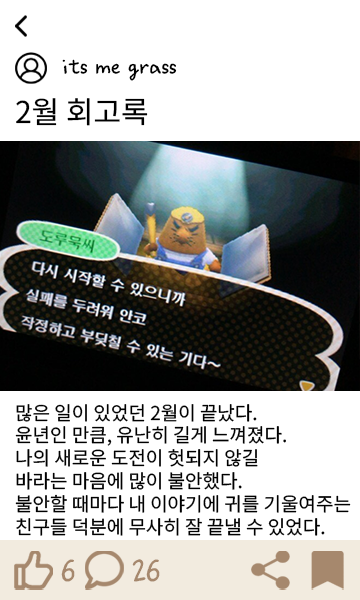
<style>
.page{position:relative;width:360px;height:600px;background:#ffffff}
.page>*{position:absolute;margin:0}
.t1{font:25px "Ownglyph_Dailyokja-Rg";color:#000000}
.t2{font:30px "NotoSansKR-Regular";color:#000000}
.t3{font:19px "NotoSansKR-Regular";color:#000000}
.t4{font:34px "Ownglyph_Dailyokja-Rg";color:#a6886d}
</style>
<div class="page">
<p class="t1" style="left:62px;top:59px;width:115px;height:22px">its me grass</p>
<p class="t2" style="left:16px;top:98px;width:132px;height:28px">2월 회고록</p>
<p class="t3" style="left:15px;top:404px;width:336px;height:132px">많은 일이 있었던 2월이 끝났다.<br>윤년인 만큼, 유난히 길게 느껴졌다.<br>나의 새로운 도전이 헛되지 않길<br>바라는 마음에 많이 불안했다.<br>불안할 때마다 내 이야기에 귀를 기울여주는<br>친구들 덕분에 무사히 잘 끝낼 수 있었다.</p>
<p class="t4" style="left:61px;top:559px;width:14px;height:23px">6</p>
<p class="t4" style="left:132px;top:559px;width:28px;height:23px">26</p>
</div>
